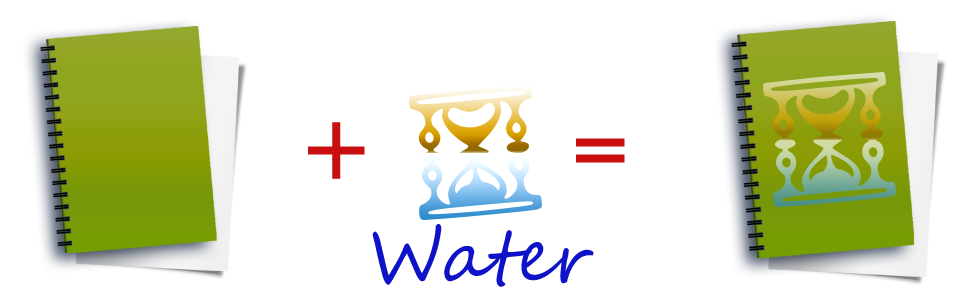
<style>
.page{position:relative;width:980px;height:300px;background:#ffffff}
.page>*{position:absolute;margin:0}
.t1{font:128.8px "Courier";color:#c80e0e}
.t2{font:72px "SegoeScript";color:#0e13c8}
</style>
<div class="page">
<p class="t1" style="left:308px;top:122px;width:57px;height:57px">+</p>
<p class="t1" style="left:576px;top:138px;width:49px;height:25px">=</p>
<p class="t2" style="left:372px;top:224px;width:222px;height:63px">Water</p>
</div>
